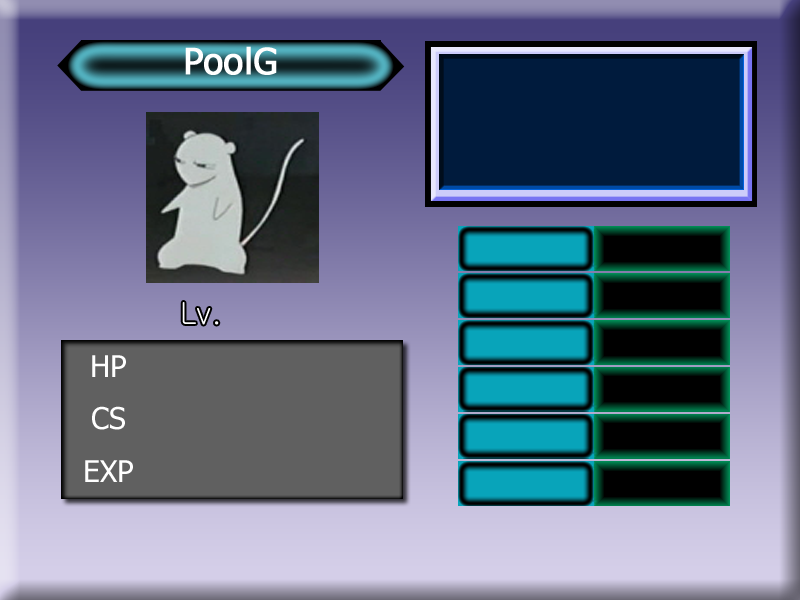
<style>
.page{position:relative;width:800px;height:600px}
.page>*{position:absolute;margin:0}
.t1{font:36px "Tahoma";color:#ffffff;font-weight:bold}
.t2{font:30px "Gulim";color:#ffffff}
.t3{font:30px "Tahoma";color:#ffffff}
</style>
<div class="page">
<p class="t1" style="left:185px;top:46px;width:92px;height:29px">PoolG</p>
<p class="t2" style="left:182px;top:302px;width:37px;height:23px">Lv.</p>
<p class="t3" style="left:85px;top:355px;width:48px;height:127px;text-align:center">HP<br>CS<br>EXP</p>
</div>
